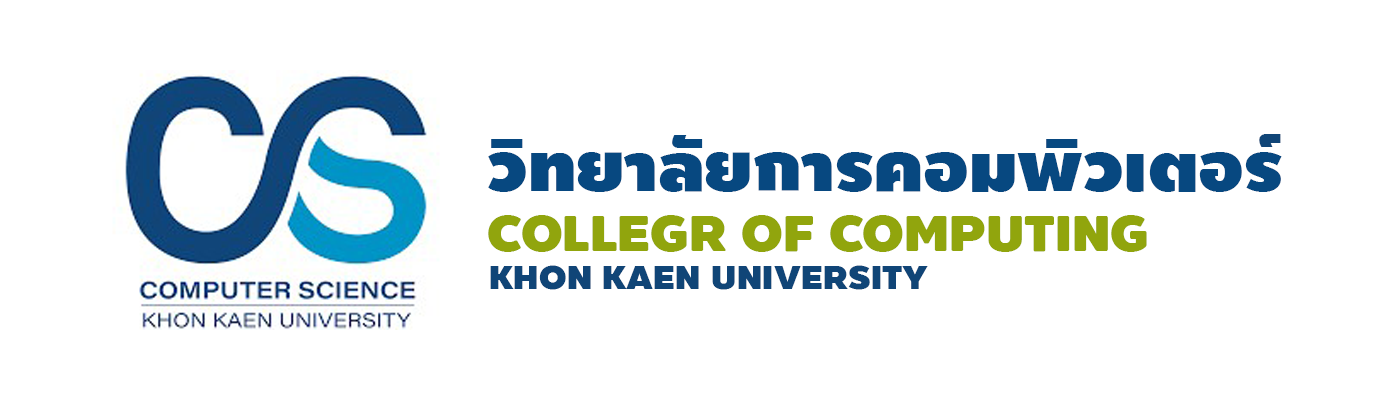
<style>
.page{position:relative;width:1400px;height:400px;background:#ffffff}
.page>*{position:absolute;margin:0}
.t1{font:75px "BoonTook-Ultra";color:#074880}
.t2{font:75px "BoonTook-Ultra";color:#104577}
.t3{font:12px "BoonTook-Mon-Ultra";color:#91a50d}
.t4{font:33.3px "BoonTook-Ultra";color:#104577}
</style>
<div class="page">
<p class="t1" style="left:488px;top:134px;width:794px;height:118px">วิทยาลัยการคอมพิวเตอร<span class="t2">์</span><span class="t3"><br>COLLEGR OF COMPUTING</span></p>
<p class="t4" style="left:490px;top:265px;width:438px;height:25px">KHON KAEN UNIVERSITY</p>
</div>
